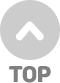
<style>
.page{position:relative;width:60px;height:83px;background:#cccccc}
.page>*{position:absolute;margin:0}
.t1{font:36px "JalnanOTF";color:#ffffff;text-transform:uppercase}
.t2{font:20px "JalnanOTF";color:#7f7f7f;text-transform:uppercase}
</style>
<div class="page">
<p class="t1" style="left:16px;top:21px;width:28px;height:20px;rotate:-90deg">&gt;</p>
<p class="t2" style="left:9px;top:66px;width:42px;height:17px">TOP</p>
</div>
